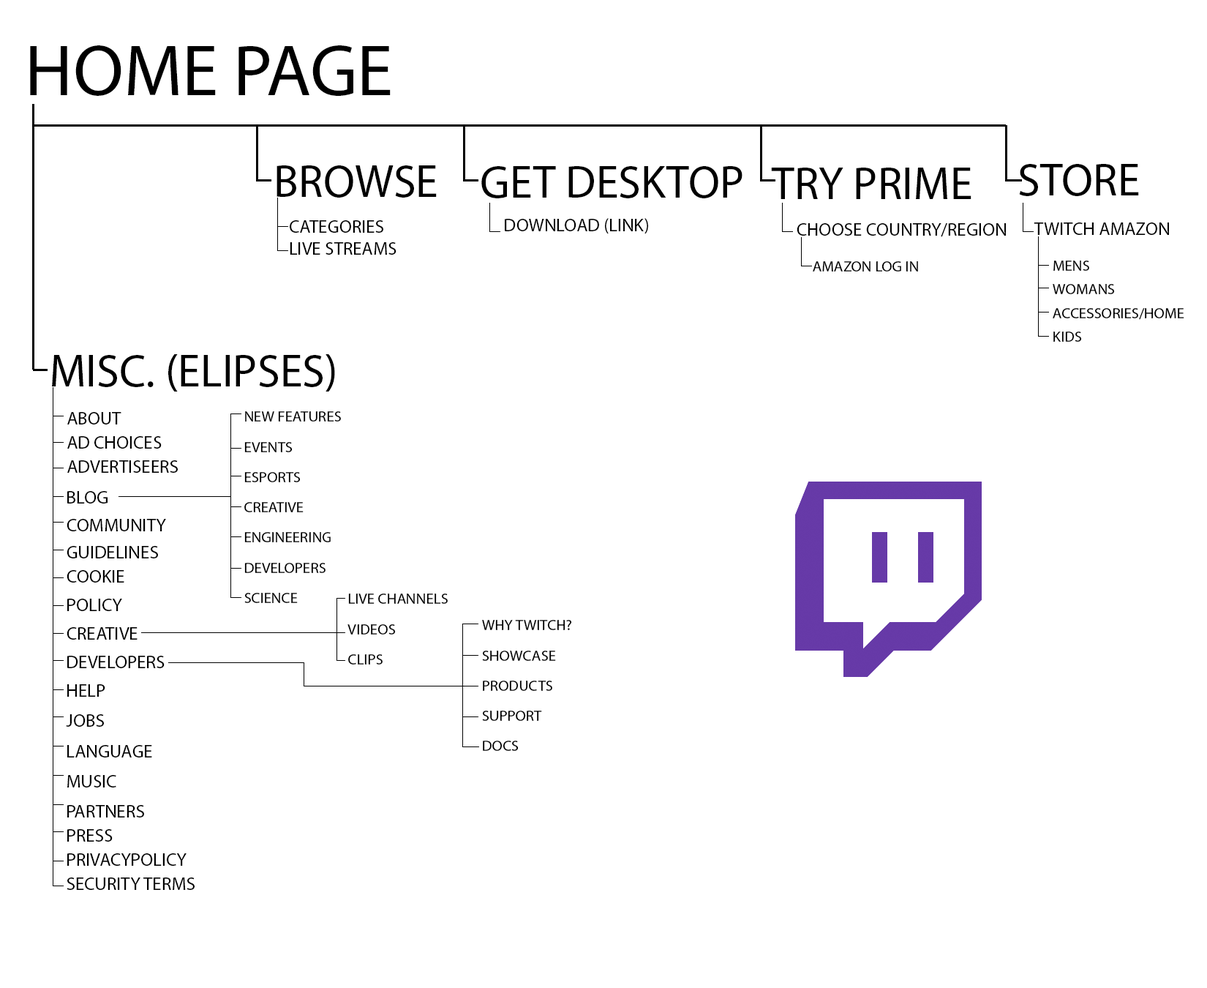
<style>
.page{position:relative;width:1207px;height:988px;background:#ffffff}
.page>*{position:absolute;margin:0}
.t1{font:73.2px "MyriadPro-Regular";color:#000000}
.t2{font:45.7px "MyriadPro-Regular";color:#000000}
.t3{font:18.3px "MyriadPro-Regular";color:#000000}
.t4{font:8.8px "MyriadPro-Regular";color:#000000}
.t5{font:15.2px "MyriadPro-Regular";color:#000000}
.t6{font:15.2px/23.6px "MyriadPro-Regular";color:#000000}
.t7{font:18.3px/24.1px "MyriadPro-Regular";color:#000000}
.t8{font:15.2px/30.2px "MyriadPro-Regular";color:#000000}
.t9{font:18.3px/27.1px "MyriadPro-Regular";color:#000000}
.t10{font:18.3px/28.7px "MyriadPro-Regular";color:#000000}
.t11{font:18.3px/30.2px "MyriadPro-Regular";color:#000000}
</style>
<div class="page">
<p class="t1" style="left:30px;top:45px;width:361px;height:51px">HOME PAGE</p>
<p class="t2" style="left:277px;top:165px;width:160px;height:33px">BROWSE</p>
<p class="t2" style="left:481px;top:166px;width:262px;height:32px">GET DESKTOP</p>
<p class="t2" style="left:771px;top:168px;width:201px;height:31px">TRY PRIME</p>
<p class="t2" style="left:1019px;top:164px;width:120px;height:32px">STORE</p>
<p class="t3" style="left:290px;top:220px;width:107px;height:35px">CATEGORIES<br>LIVE STREAMS</p>
<p class="t4" style="left:505px;top:218px;width:143px;height:16px">DOWNLOAD (LINK)</p>
<p class="t4" style="left:797px;top:223px;width:209px;height:14px">CHOOSE COUNTRY/REGION</p>
<p class="t3" style="left:1034px;top:222px;width:135px;height:13px">TWITCH AMAZON</p>
<p class="t5" style="left:813px;top:261px;width:105px;height:10px">AMAZON LOG IN</p>
<p class="t6" style="left:1053px;top:260px;width:132px;height:82px">MENS<br>WOMANS<br>ACCESSORIES/HOME<br>KIDS</p>
<p class="t2" style="left:52px;top:354px;width:283px;height:37px">MISC. (ELIPSES)</p>
<p class="t7" style="left:67px;top:412px;width:111px;height:61px">ABOUT <br>AD CHOICES <br>ADVERTISEERS</p>
<p class="t8" style="left:244px;top:411px;width:97px;height:192px">NEW FEATURES<br>EVENTS<br>ESPORTS<br>CREATIVE<br>ENGINEERING<br>DEVELOPERS<br>SCIENCE</p>
<p class="t7" style="left:66px;top:491px;width:129px;height:399px"><span class="t9">BLOG <br>COMMUNITY<br>GUIDELINES<br></span>COOKIE<br><span class="t10">POLICY<br>CREATIVE<br>DEVELOPERS<br>HELP<br></span><span class="t11">JOBS<br>LANGUAGE<br>MUSIC<br>PARTNERS<br></span>PRESS<br>PRIVACYPOLICY<br>SECURITY TERMS</p>
<p class="t8" style="left:348px;top:593px;width:100px;height:71px">LIVE CHANNELS<br>VIDEOS<br>CLIPS</p>
<p class="t8" style="left:482px;top:620px;width:90px;height:131px">WHY TWITCH?<br>SHOWCASE<br>PRODUCTS<br>SUPPORT<br>DOCS</p>
</div>
